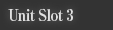
<style>
.page{position:relative;width:113px;height:30px;background:#333333}
.page>*{position:absolute;margin:0}
.t1{font:16px "RyuminPro-ExBold";letter-spacing:-0.04em;color:#dfdfdf;scale:0.9 1}
</style>
<div class="page">
<p class="t1" style="left:8px;top:8px;width:65px;height:13px">Unit Slot 3</p>
</div>
